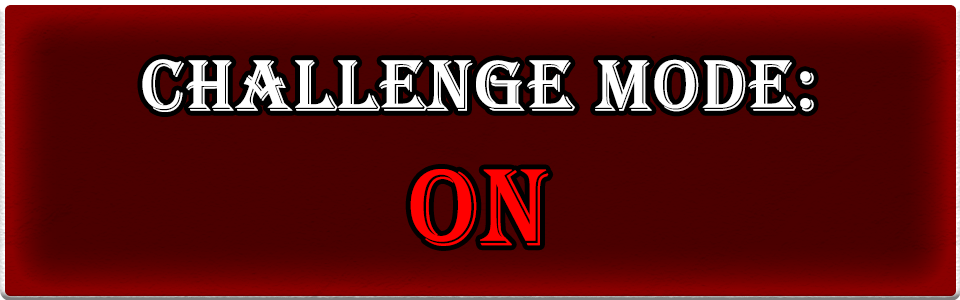
<style>
.page{position:relative;width:960px;height:300px;background:#4b0000}
.page>*{position:absolute;margin:0}
.t1{font:74.6px "Algerian";color:#ffffff;font-weight:bold}
.t2{font:111.9px "Algerian";color:#ff0000;font-weight:bold}
</style>
<div class="page">
<p class="t1" style="left:142px;top:59px;width:672px;height:187px;text-align:center">Challenge Mode:<br><span class="t2">ON</span></p>
</div>
